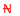
<style>
.page{position:relative;width:20px;height:16px;background:#ffffff}
.page>*{position:absolute;margin:0}
.t1{font:12px "DejaVuSans";color:#ff0000}
.t2{font:13px "DejaVuSans"}
</style>
<div class="page">
<p class="t1" style="left:4px;top:4px;width:7px;height:9px">N</p>
<p class="t2" style="left:2px;top:8px;width:8px;height:2px">_</p>
</div>
